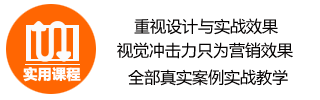
<style>
.page{position:relative;width:320px;height:100px;background:#ffffff}
.page>*{position:absolute;margin:0}
.t1{font:16px "MicrosoftYaHei";color:#030000}
.t2{font:14px "MicrosoftYaHei-Bold";color:#fefdfd;text-transform:uppercase;font-weight:bold}
</style>
<div class="page">
<p class="t1" style="left:134px;top:18px;width:144px;height:17px">重视设计与实战效果</p>
<p class="t1" style="left:117px;top:42px;width:176px;height:17px">视觉冲击力只为营销效果</p>
<p class="t2" style="left:23px;top:67px;width:58px;height:15px">实用课程</p>
<p class="t1" style="left:128px;top:69px;width:160px;height:17px">全部真实案例实战教学</p>
</div>
